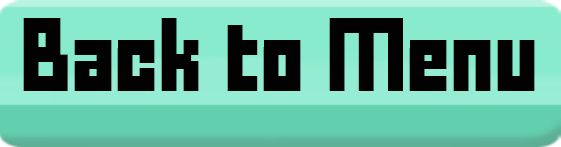
<style>
.page{position:relative;width:561px;height:147px;background:#020202}
.page>*{position:absolute;margin:0}
.t1{font:58.3px "FFFForward";color:#020202}
</style>
<div class="page">
<p class="t1" style="left:23px;top:18px;width:512px;height:73px">Back to Menu</p>
</div>
